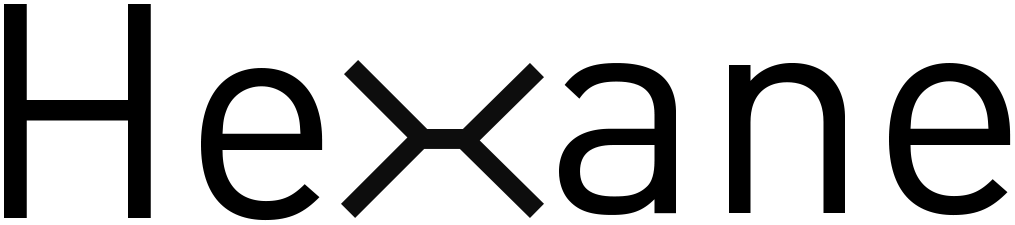
<style>
.page{position:relative;width:1015px;height:225px;background:#ffffff}
.page>*{position:absolute;margin:0}
.t1{font:300px "DINPro-Regular";color:#000000}
</style>
<div class="page">
<p class="t1" style="left:4px;top:4px;width:319px;height:217px">He</p>
<p class="t1" style="left:559px;top:63px;width:452px;height:153px">ane</p>
</div>
